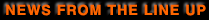
<style>
.page{position:relative;width:209px;height:20px;background:#000000}
.page>*{position:absolute;margin:0}
.t1{font:14px "Helvetica-Bold";letter-spacing:0.08em;color:#ff6600}
</style>
<div class="page">
<p class="t1" style="left:6px;top:4px;width:200px;height:12px">NEWS FROM THE LINE UP</p>
</div>
